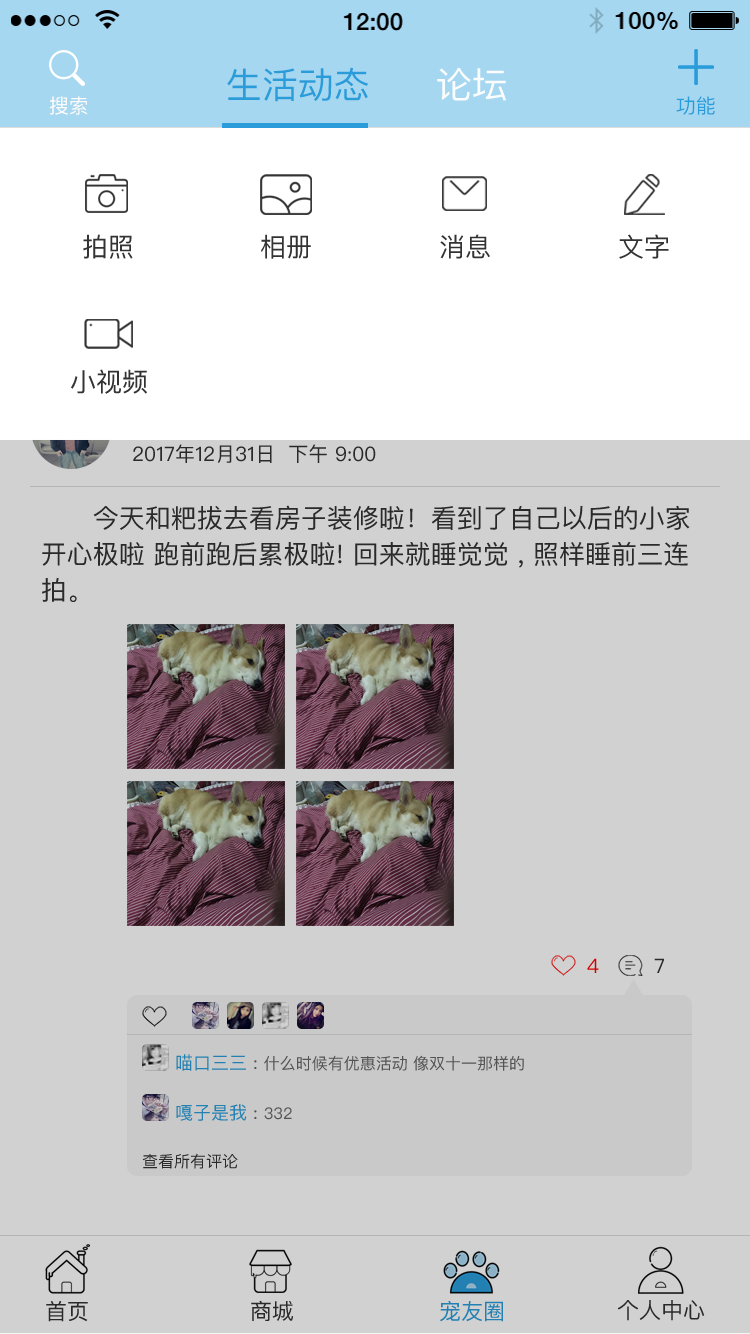
<style>
.page{position:relative;width:750px;height:1334px;background:#d1d1d1}
.page>*{position:absolute;margin:0}
.t1{font:36px "PingFangSC-Regular";color:#2a9cda}
.t2{font:36px "PingFangSC-Regular";color:#fbfcfd}
.t3{font:20px "PingFangSC-Regular";color:#fefbfb}
.t4{font:20px "PingFangSC-Regular";color:#2a9cda}
.t5{font:26px "PingFangSC";color:#333333}
.t6{font:20px "PingFangSC";color:#333333}
.t7{font:26px/36px "PingFangSC";color:#333333}
.t8{font:20px "PingFangSC";color:#d10000}
.t9{font:16px "PingFangSC";color:#666666}
.t10{font:18px "PingFangSC";color:#2a9cda}
.t11{font:18px "PingFangSC";color:#666666}
.t12{font:18px "PingFangSC";color:#2280b3}
.t13{font:16px "PingFangSC";color:#2280b3}
.t14{font:16px "PingFangSC";color:#333333}
.t15{font:22px "PingFangSC";color:#333333}
.t16{font:22px "PingFangSC";color:#2280b3}
</style>
<div class="page">
<p class="t1" style="left:227px;top:67px;width:142px;height:35px">生活动态</p>
<p class="t2" style="left:437px;top:68px;width:69px;height:33px">论坛</p>
<p class="t3" style="left:49px;top:96px;width:39px;height:19px">搜索</p>
<p class="t4" style="left:676px;top:96px;width:39px;height:19px">功能</p>
<p class="t5" style="left:83px;top:234px;width:50px;height:25px">拍照</p>
<p class="t5" style="left:261px;top:234px;width:50px;height:25px">相册</p>
<p class="t5" style="left:440px;top:234px;width:50px;height:25px">消息</p>
<p class="t5" style="left:619px;top:234px;width:50px;height:25px">文字</p>
<p class="t5" style="left:71px;top:369px;width:76px;height:25px">小视频</p>
<p class="t6" style="left:133px;top:444px;width:243px;height:19px">2017年12月31日  下午 9:00</p>
<p class="t7" style="left:42px;top:505px;width:648px;height:97px">今天和粑拔去看房子装修啦！看到了自己以后的小家开心极啦 跑前跑后累极啦! 回来就睡觉觉 , 照样睡前三连拍。</p>
<p class="t8" style="left:587px;top:958px;width:12px;height:15px">4</p>
<p class="t6" style="left:654px;top:958px;width:10px;height:15px">7</p>
<p class="t9" style="left:176px;top:1054px;width:348px;height:17px"><span class="t10">喵口三三 </span><span class="t11">: </span>什么时候有优惠活动 像双十一那样的</p>
<p class="t12" style="left:176px;top:1104px;width:116px;height:17px">嘎子是我 : <span class="t13">332</span></p>
<p class="t14" style="left:142px;top:1153px;width:96px;height:16px">查看所有评论</p>
<p class="t15" style="left:46px;top:1301px;width:42px;height:21px">首页</p>
<p class="t15" style="left:251px;top:1300px;width:42px;height:21px">商城</p>
<p class="t16" style="left:440px;top:1301px;width:63px;height:21px">宠友圈</p>
<p class="t15" style="left:617px;top:1300px;width:88px;height:21px">个人中心</p>
</div>
